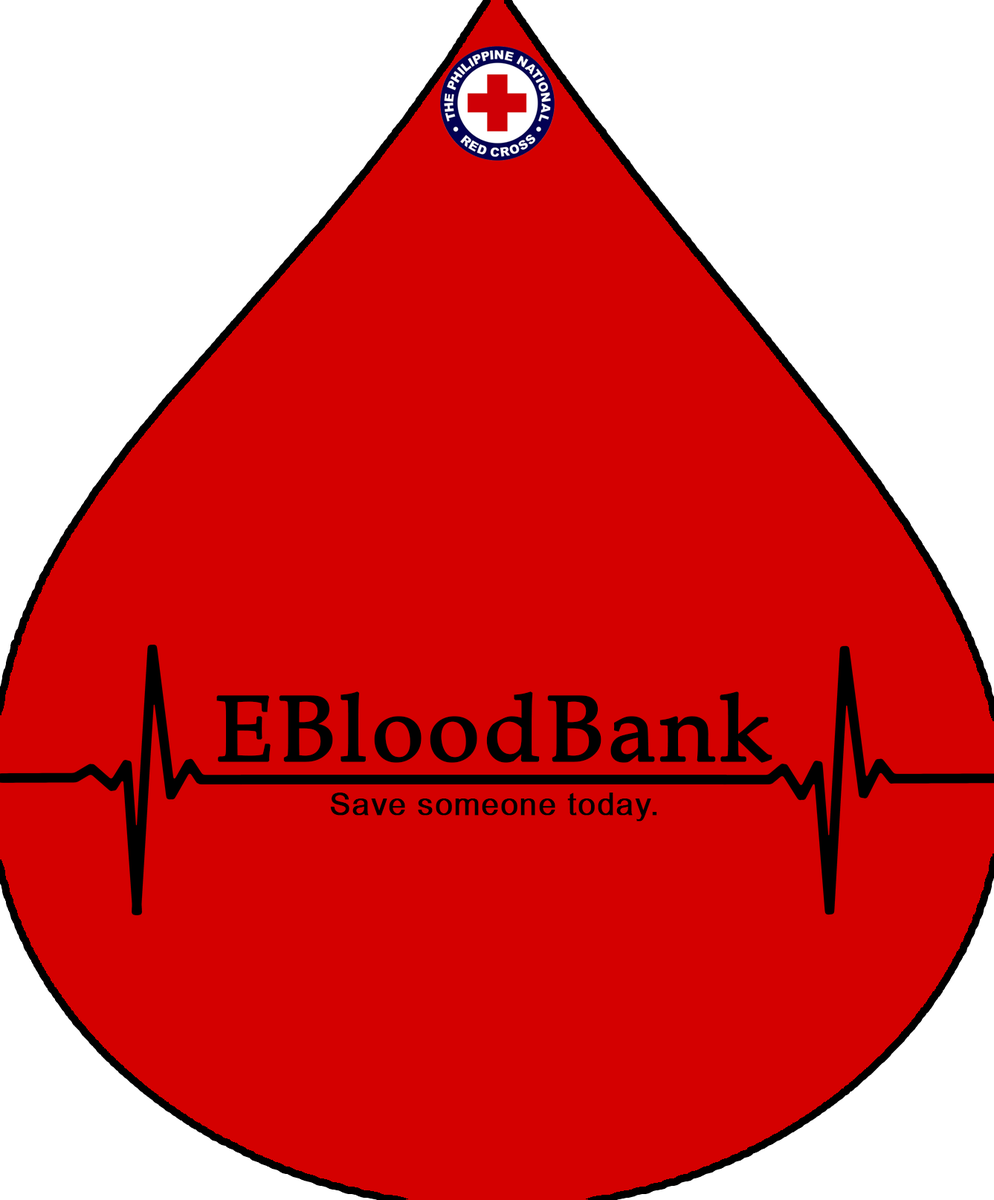
<style>
.page{position:relative;width:994px;height:1200px;background:#d40000}
.page>*{position:absolute;margin:0}
.t1{font:92.9px "BookAntiqua";letter-spacing:0.03em;color:#000000;font-weight:bold}
.t2{font:30.8px "ArialMT";letter-spacing:0.03em;color:#000000;font-weight:bold}
</style>
<div class="page">
<p class="t1" style="left:216px;top:691px;width:556px;height:72px">EBloodBank</p>
<p class="t2" style="left:330px;top:792px;width:327px;height:29px">Save someone today.</p>
</div>
